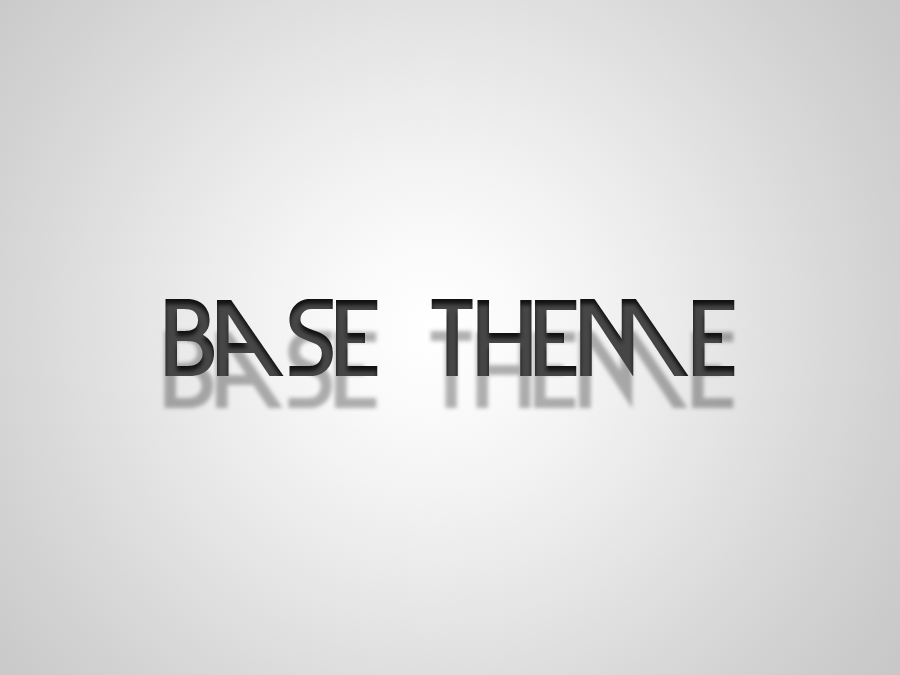
<style>
.page{position:relative;width:900px;height:675px}
.page>*{position:absolute;margin:0}
.t1{font:101.7px "DevilBreezeMedium";color:#464646}
</style>
<div class="page">
<p class="t1" style="left:165px;top:299px;width:570px;height:77px">base theme</p>
</div>
